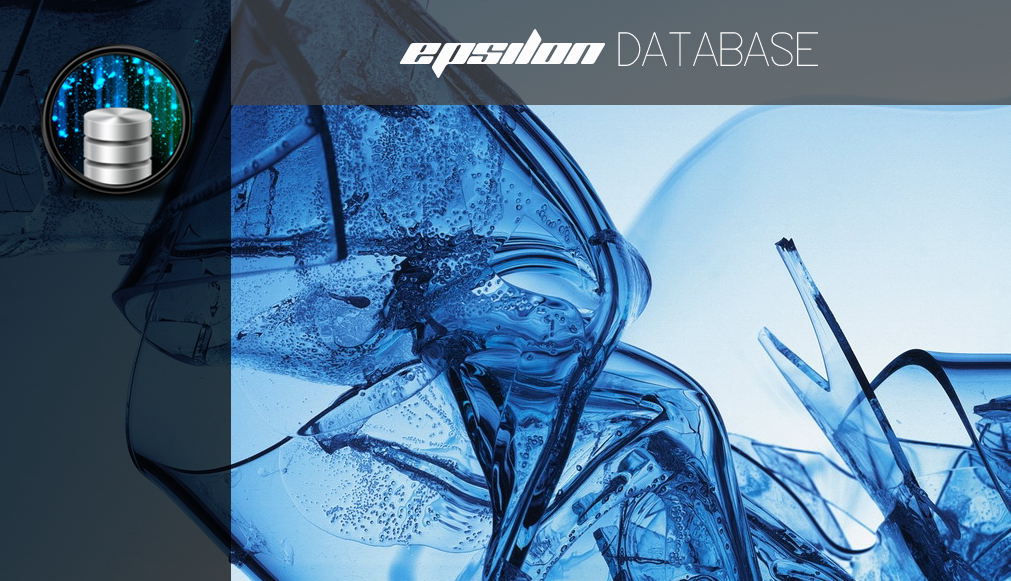
<style>
.page{position:relative;width:1011px;height:581px}
.page>*{position:absolute;margin:0}
.t1{font:40px "PlanetKosmos";color:#fdfcfc}
.t2{font:48px "SecretCode";color:#fdfcfc}
</style>
<div class="page">
<p class="t1" style="left:400px;top:29px;width:205px;height:49px">EPSILON</p>
<p class="t2" style="left:618px;top:32px;width:200px;height:34px">DATABASE</p>
</div>
